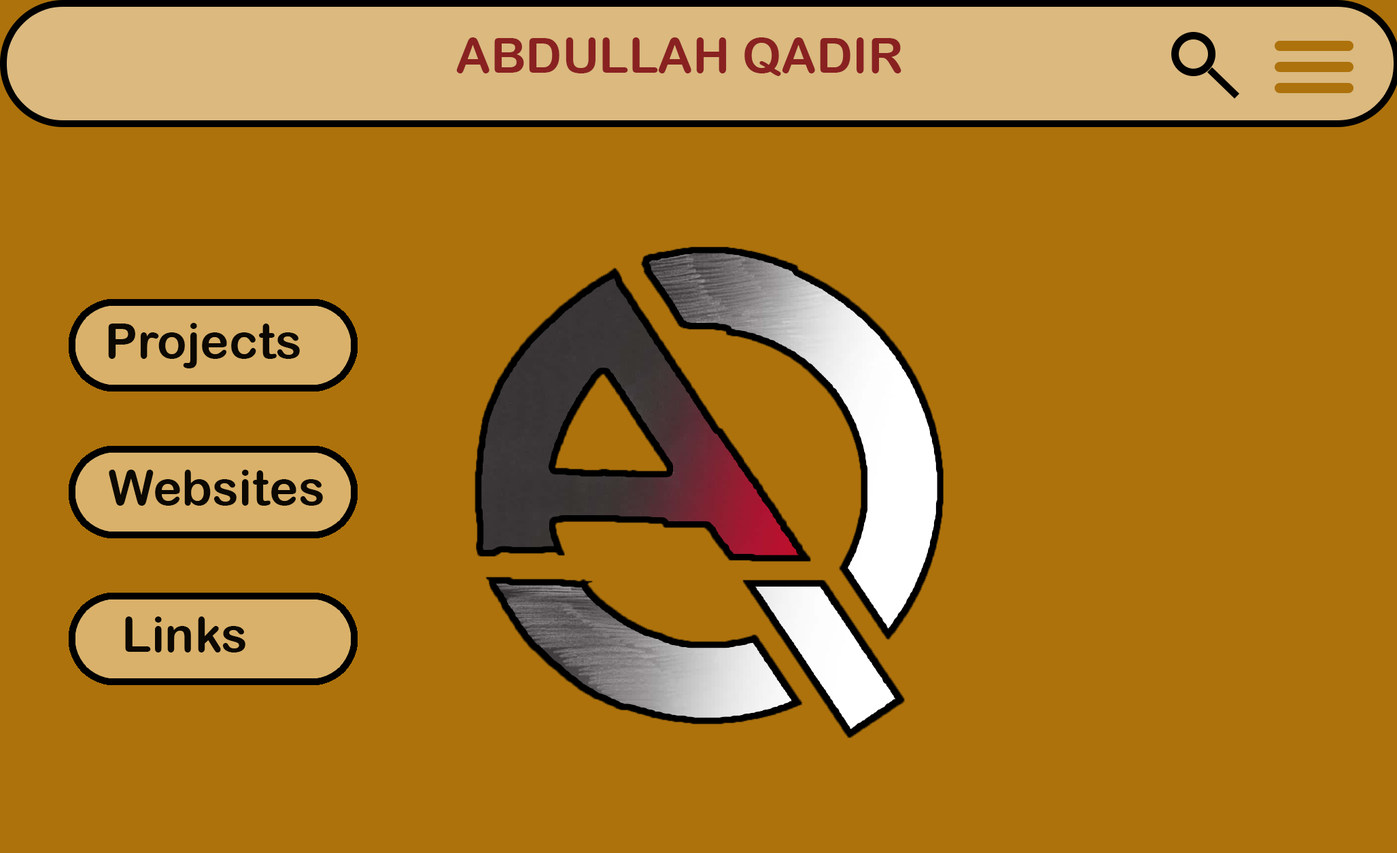
<style>
.page{position:relative;width:1397px;height:853px;background:#ad720c}
.page>*{position:absolute;margin:0}
.t1{font:49px "ArialRoundedMTBold";color:#892121}
.t2{font:49px "ArialRoundedMTBold";color:#0c0802}
</style>
<div class="page">
<p class="t1" style="left:456px;top:37px;width:446px;height:39px">ABDULLAH QADIR</p>
<p class="t2" style="left:108px;top:323px;width:192px;height:46px">Projects</p>
<p class="t2" style="left:109px;top:470px;width:214px;height:36px">Websites</p>
<p class="t2" style="left:125px;top:617px;width:120px;height:36px">Links</p>
</div>
